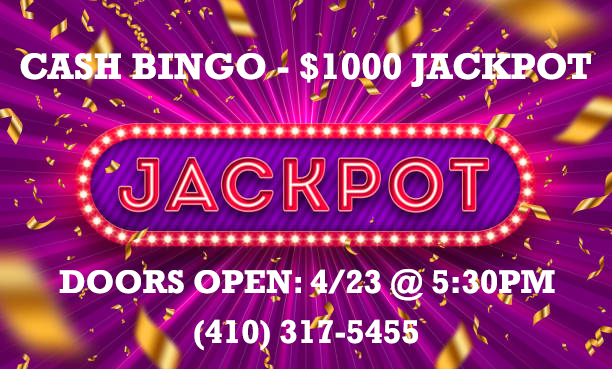
<style>
.page{position:relative;width:612px;height:369px}
.page>*{position:absolute;margin:0}
.t1{font:37.5px "Rockwell-Bold";color:#ffffff}
.t2{font:33.3px "Rockwell-Bold";color:#ffffff}
</style>
<div class="page">
<p class="t1" style="left:20px;top:52px;width:571px;height:35px">CASH BINGO - $1000 JACKPOT</p>
<p class="t2" style="left:59px;top:269px;width:496px;height:32px">DOORS OPEN: 4/23 @ 5:30PM</p>
<p class="t2" style="left:194px;top:319px;width:224px;height:32px">(410) 317-5455</p>
</div>
